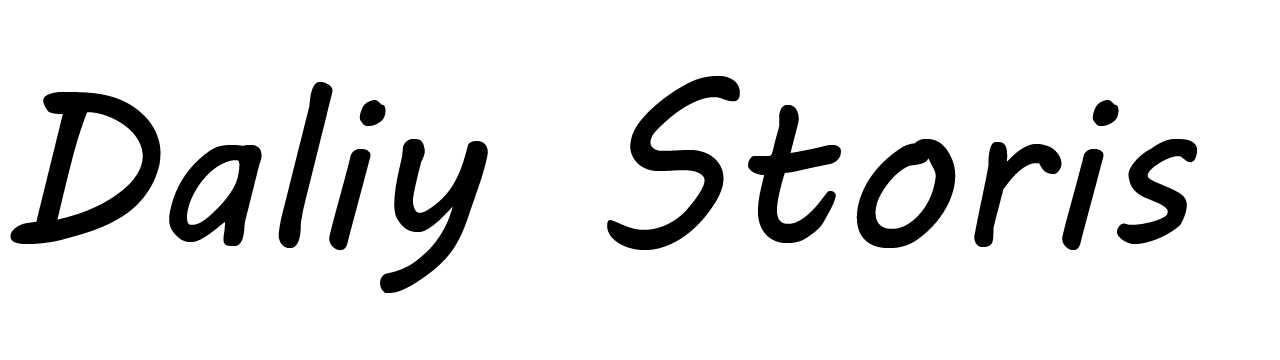
<style>
.page{position:relative;width:1280px;height:360px;background:#ffffff}
.page>*{position:absolute;margin:0}
.t1{font:218px "MVBoli";color:#000000}
</style>
<div class="page">
<p class="t1" style="left:10px;top:75px;width:1187px;height:218px">Daliy Storis</p>
</div>
